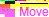
<style>
.page{position:relative;width:49px;height:17px}
.page>*{position:absolute;margin:0}
.t1{font:12px "ArialMT"}
</style>
<div class="page">
<p class="t1" style="left:20px;top:4px;width:29px;height:9px">Move</p>
</div>
